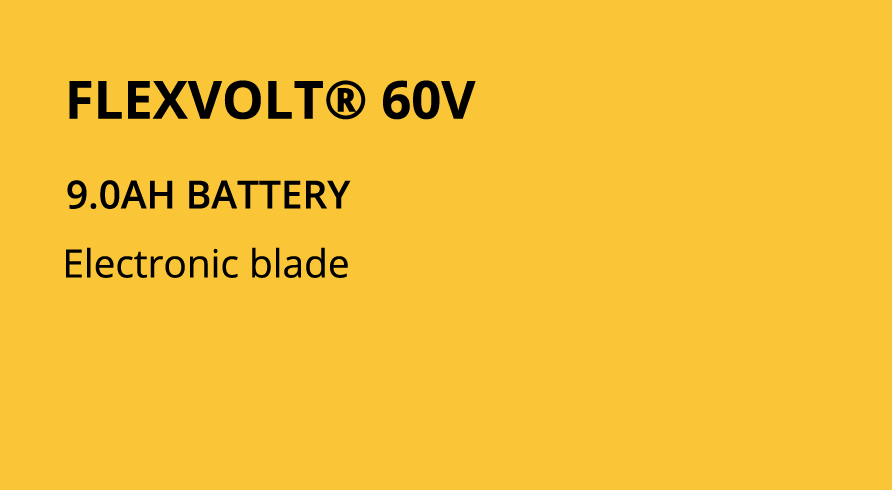
<style>
.page{position:relative;width:892px;height:490px;background:#fac537}
.page>*{position:absolute;margin:0}
.t1{font:52.6px "OpenSans-Bold";color:#000000}
.t2{font:38.8px "OpenSans-Semibold";color:#000000}
.t3{font:38.8px "OpenSans";color:#000000}
</style>
<div class="page">
<p class="t1" style="left:69px;top:80px;width:407px;height:40px">FLEXVOLT® 60V</p>
<p class="t2" style="left:67px;top:180px;width:284px;height:29px">9.0AH BATTERY</p>
<p class="t3" style="left:66px;top:247px;width:282px;height:31px">Electronic blade</p>
</div>
